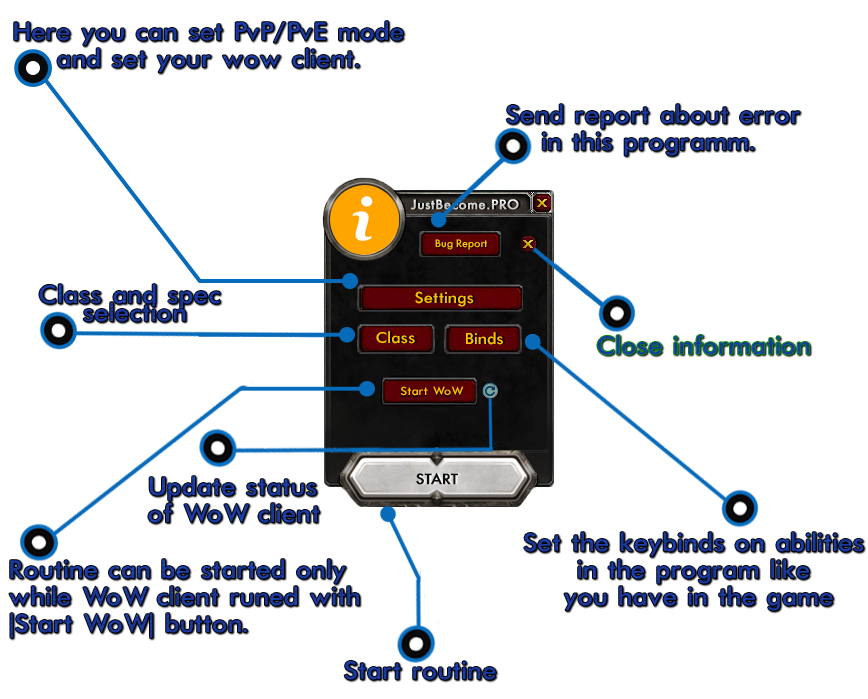
<style>
.page{position:relative;width:868px;height:699px;background:#ffffff}
.page>*{position:absolute;margin:0}
.t1{font:28.5px/9px "Futura-Normal";letter-spacing:-0.005em;color:#1b389e;scale:1.05 1}
.t2{font:28.5px/9px "Futura-Normal";letter-spacing:-0.005em;color:#1c389f;scale:1.05 1}
.t3{font:28.5px "Futura-Normal";letter-spacing:-0.005em;color:#1b389e;scale:1.05 1}
.t4{font:28.5px "Futura-Normal";letter-spacing:-0.005em;color:#1b389d;scale:1.05 1}
</style>
<div class="page">
<p class="t1" style="left:14px;top:21px;width:389px;height:52px;text-align:center">Here you can set PvP/PvE mode<br><br><br>and set your wow client.</p>
<p class="t1" style="left:506px;top:104px;width:294px;height:52px">Send report about error<br><br><br> in this programm.</p>
<p class="t2" style="left:39px;top:284px;width:181px;height:38px;text-align:center">Class and spec <br><br>selection</p>
<p class="t3" style="left:597px;top:335px;width:213px;height:20px">Close information</p>
<p class="t1" style="left:148px;top:476px;width:171px;height:47px">Update status <br><br><br>of WoW client</p>
<p class="t1" style="left:524px;top:532px;width:340px;height:79px;text-align:center">Set the keybinds on abilities <br><br><br>in the program like <br><br><br>you have in the game</p>
<p class="t1" style="left:9px;top:559px;width:350px;height:79px">Routine can be started only <br><br><br>while WoW client runed with<br><br><br>|“”’’””Start WoW| button.</p>
<p class="t4" style="left:344px;top:661px;width:152px;height:19px">Start routine</p>
</div>
